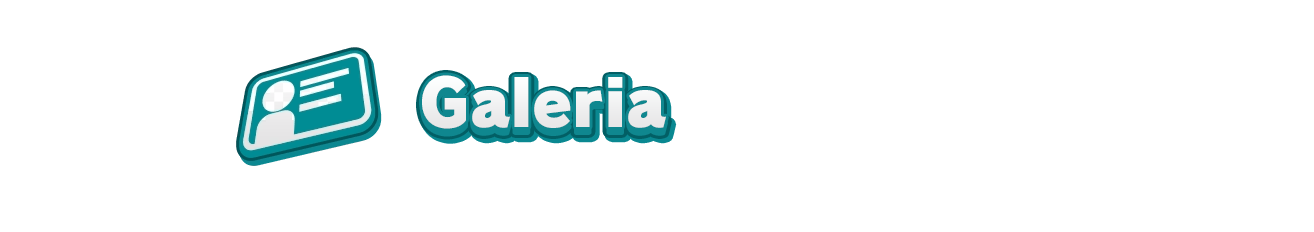
<style>
.page{position:relative;width:1314px;height:232px;background:#ffffff}
.page>*{position:absolute;margin:0}
.t1{font:69.5px "RodinPro-UB";color:#ededed;scale:0.92 1}
.t2{font:64px "RodinPro-UB";color:#efeff0}
</style>
<div class="page">
<p class="t1" style="left:422px;top:76px;width:244px;height:58px">Galeria</p>
<p class="t2" style="left:422px;top:75px;width:244px;height:54px">Galeria</p>
</div>
